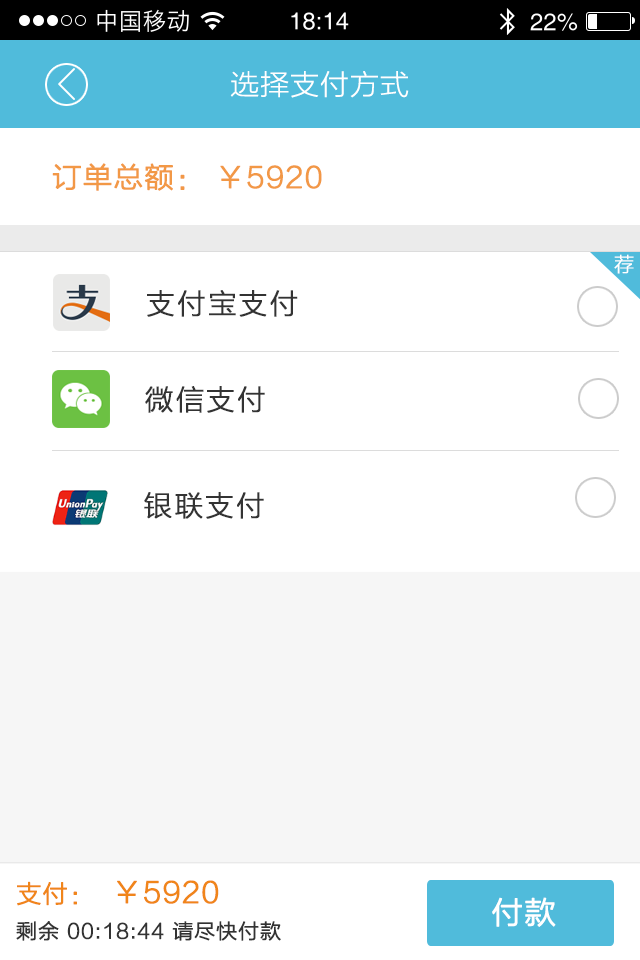
<style>
.page{position:relative;width:640px;height:960px;background:#ffffff}
.page>*{position:absolute;margin:0}
.t1{font:28px "STHeitiSC-Light";letter-spacing:-0.04em;color:#ffffff;scale:1.03 1}
.t2{font:28px "STHeitiSC-Light";letter-spacing:-0.04em;color:#f29846;font-weight:bold;scale:1.03 1}
.t3{font:20px "STHeitiSC-Light";color:#ffffff;text-transform:uppercase;font-weight:bold}
.t4{font:28px "STHeitiSC-Light";color:#333333;text-transform:uppercase;font-weight:bold}
.t5{font:28px "STHeitiSC-Light";letter-spacing:-0.04em;color:#f0851a;font-weight:bold}
.t6{font:24px "STHeitiSC-Light";letter-spacing:-0.04em;color:#f0851a;font-weight:bold}
.t7{font:30px "STHeitiSC-Light";letter-spacing:-0.04em;color:#ffffff;font-weight:bold}
.t8{font:20px "STHeitiSC-Light";letter-spacing:-0.04em;color:#333333;font-weight:bold}
</style>
<div class="page">
<p class="t1" style="left:230px;top:71px;width:179px;height:27px">选择支付方式</p>
<p class="t2" style="left:52px;top:163px;width:270px;height:28px">订单总额： ￥5920</p>
<p class="t3" style="left:614px;top:254px;width:20px;height:20px">荐</p>
<p class="t4" style="left:147px;top:290px;width:151px;height:27px">支付宝支付</p>
<p class="t4" style="left:145px;top:386px;width:120px;height:27px">微信支付</p>
<p class="t4" style="left:144px;top:492px;width:120px;height:27px">银联支付</p>
<p class="t5" style="left:17px;top:880px;width:202px;height:26px"><span class="t6">支付：  </span>￥5920</p>
<p class="t7" style="left:492px;top:897px;width:64px;height:30px">付款</p>
<p class="t8" style="left:16px;top:921px;width:265px;height:20px">剩余 00:18:44 请尽快付款</p>
</div>
